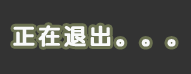
<style>
.page{position:relative;width:191px;height:74px;background:#333333}
.page>*{position:absolute;margin:0}
.t1{font:22.7px "FZY4JW--GB1-0";letter-spacing:0.1em;color:#f8f9f9;font-weight:bold}
</style>
<div class="page">
<p class="t1" style="left:13px;top:25px;width:163px;height:22px">正在退出。。。</p>
</div>
